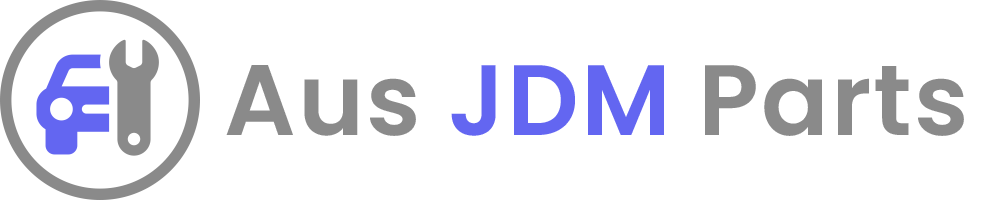
<style>
.page{position:relative;width:1000px;height:200px;background:#ffffff}
.page>*{position:absolute;margin:0}
.t1{font:100px "Poppins-SemiBold";letter-spacing:0.02em;color:#8a8a8a}
.t2{font:100px "Poppins-SemiBold";letter-spacing:0.02em;color:#6366f1}
</style>
<div class="page">
<p class="t1" style="left:226px;top:65px;width:738px;height:71px">Aus <span class="t2">JDM </span>Parts</p>
</div>
